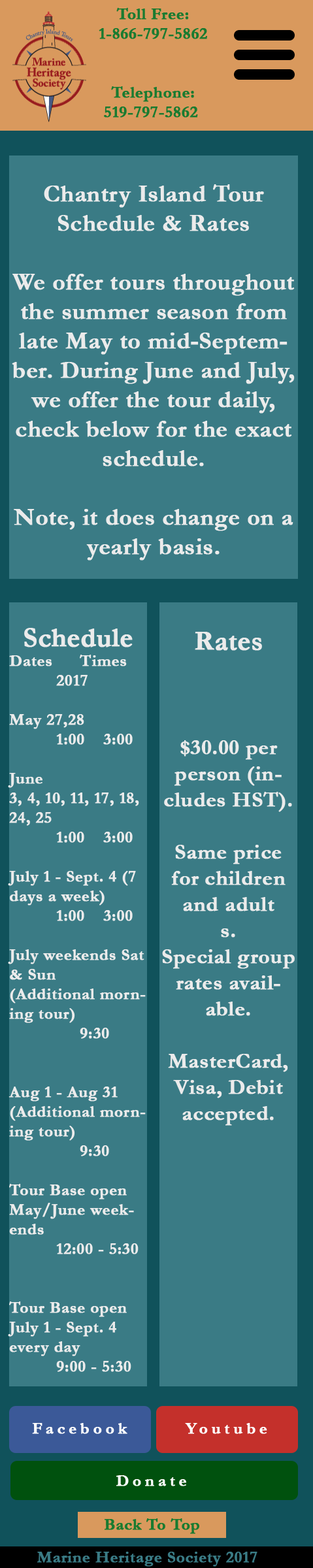
<style>
.page{position:relative;width:313px;height:1568px;background:#3a7b85}
.page>*{position:absolute;margin:0}
.t1{font:16.3px "Garamond-Bold";color:#197b30;font-weight:bold}
.t2{font:24.5px "Garamond-Bold";color:#ebebeb;font-weight:bold}
.t3{font:16.3px "Garamond-Bold";color:#ebebeb;font-weight:bold}
.t4{font:27.2px "Garamond-Bold";color:#ebebeb;font-weight:bold}
.t5{font:21.8px "Garamond-Bold";color:#ebebeb;font-weight:bold}
.t6{font:16.3px "Garamond-Bold";letter-spacing:0.2em;color:#fefefe;font-weight:bold}
.t7{font:16.3px "Garamond-Bold";letter-spacing:0.2em;color:#ffffff;font-weight:bold}
.t8{font:16.3px "Garamond-Bold";color:#3a7b85;font-weight:bold}
</style>
<div class="page">
<p class="t1" style="left:99px;top:8px;width:108px;height:31px;text-align:center">Toll Free:<br>1-866-797-5862</p>
<p class="t1" style="left:104px;top:86px;width:94px;height:32px;text-align:center">Telephone:<br>519-797-5862</p>
<p class="t2" style="left:12px;top:184px;width:283px;height:377px;text-align:center">Chantry Island Tour Schedule &amp; Rates<br><br>We offer tours throughout the summer season from late May to mid-September. During June and July, we offer the tour daily, check below for the exact schedule. <br><br>Note, it does change on a yearly basis.</p>
<p class="t3" style="left:8px;top:628px;width:138px;height:744px;text-align:center"><span class="t4">Schedule<br></span>Dates  Times<br>  2017   <br><br>May 27,28     1:00 3:00<br><br>June <br>3, 4, 10, 11, 17, 18, 24, 25       1:00 3:00<br><br>July 1 - Sept. 4 (7 days a week)    1:00 3:00<br>   <br>July weekends Sat &amp; Sun <br>(Additional morning tour)       9:30  <br><br>Aug 1 - Aug 31 (Additional morning tour)       9:30  <br>Tour Base open May/June weekends         12:00 - 5:30  <br><br>Tour Base open July 1 - Sept. 4 every day     9:00 - 5:30</p>
<p class="t5" style="left:162px;top:632px;width:133px;height:494px;text-align:center"><span class="t4">Rates<br></span><br><br><br>$30.00 per person (includes HST). <br><br>Same price for children and adult<br>s.<br>Special group rates available.<br><br>MasterCard, Visa, Debit accepted.</p>
<p class="t6" style="left:32px;top:1423px;width:95px;height:11px">Facebook</p>
<p class="t7" style="left:185px;top:1423px;width:82px;height:11px">Youtube</p>
<p class="t7" style="left:116px;top:1475px;width:70px;height:11px">Donate</p>
<p class="t1" style="left:105px;top:1518px;width:94px;height:16px">Back To Top</p>
<p class="t8" style="left:37px;top:1552px;width:220px;height:15px">Marine Heritage Society 2017</p>
</div>
